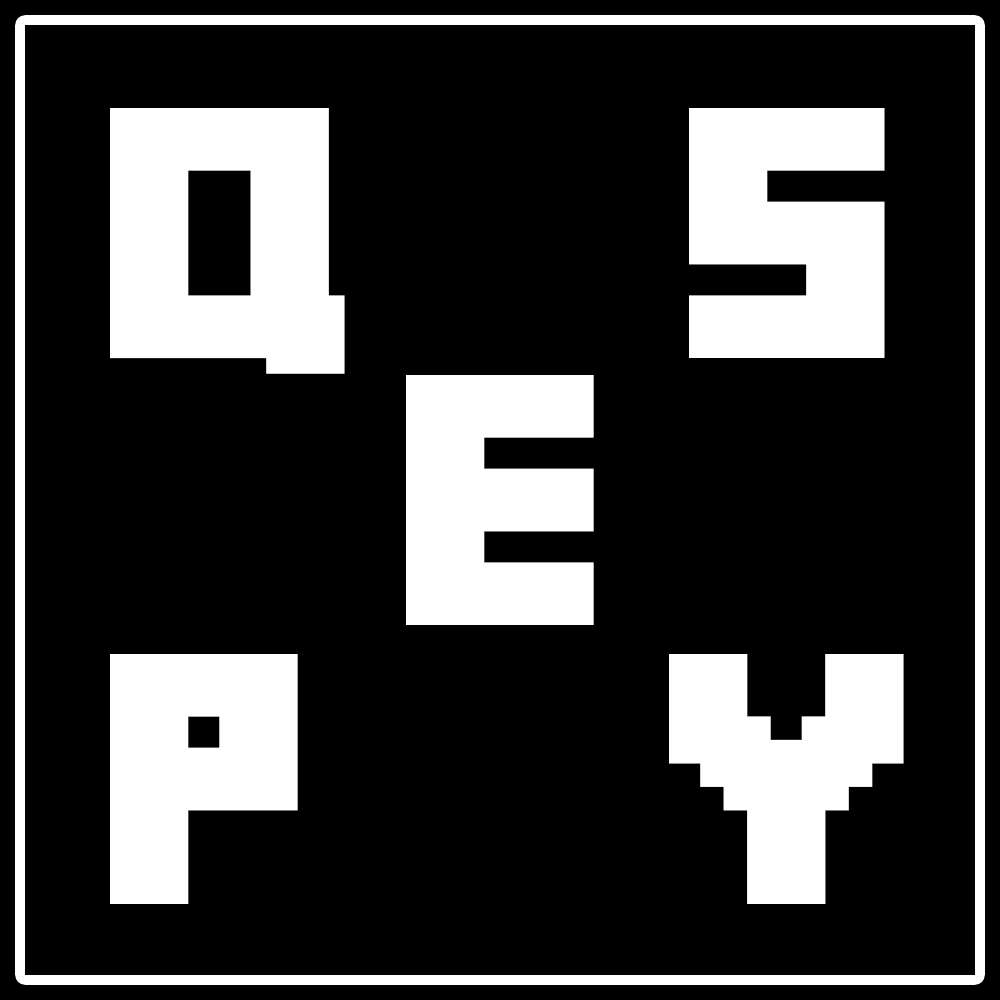
<style>
.page{position:relative;width:1000px;height:1000px;background:#000000}
.page>*{position:absolute;margin:0}
.t1{font:250px "MineCrafter-3";letter-spacing:0.005em;color:#ffffff}
</style>
<div class="page">
<p class="t1" style="left:110px;top:108px;width:235px;height:266px">Q</p>
<p class="t1" style="left:689px;top:108px;width:196px;height:250px">S</p>
<p class="t1" style="left:406px;top:375px;width:188px;height:250px">E</p>
<p class="t1" style="left:110px;top:654px;width:188px;height:250px">P</p>
<p class="t1" style="left:669px;top:654px;width:235px;height:250px">y</p>
</div>
